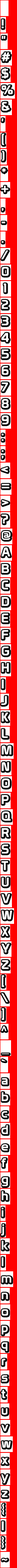
<style>
.page{position:relative;width:17px;height:1568px;background:#ff0000}
.page>*{position:absolute;margin:0}
.t1{font:12.4px/16.5px "Prototype";color:#ffffff}
</style>
<div class="page">
<p class="t1" style="left:1px;top:19px;width:11px;height:1542px">!<br>"<br>#<br>$<br>%<br>&amp;<br>'<br>(<br>)<br>*<br>+<br>,<br>-<br>.<br>/<br>0<br> 1<br>2<br>3<br>4<br>5<br>6<br>7<br>8<br>9<br>:<br>;<br>&lt;<br>=<br>&gt;<br>?<br>@<br>A<br>B<br>C<br>D<br>E<br>F<br>G<br>H<br>I<br>J<br>K<br>L<br>M<br>N<br>O<br>P<br>Q<br>R<br>S<br>T<br>U<br>V<br>W<br>X<br>Y<br>Z<br>[<br>\<br>]<br>^<br>_<br>`<br>a<br>b<br>c<br>d<br>e<br>f<br>g<br>h<br>i<br>j<br>k<br>l<br>m<br>n<br>o<br>p<br>q<br>r<br>s<br>t<br>u<br>v<br>w<br>x<br>y<br>z<br>{<br>|<br>}<br>~</p>
</div>
